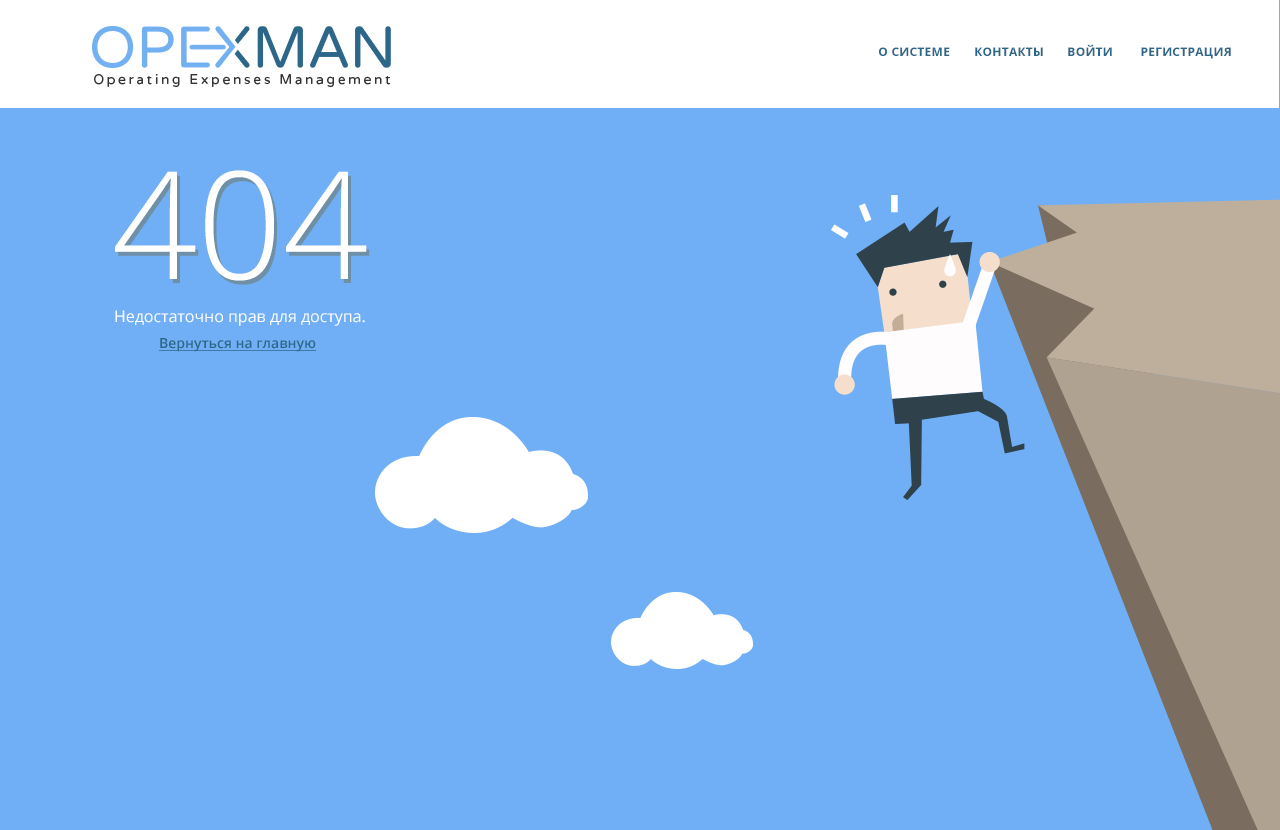
<style>
.page{position:relative;width:1280px;height:830px;background:#70aff5}
.page>*{position:absolute;margin:0}
.t1{font:12px "OpenSans-Bold";letter-spacing:0.025em;color:#2c6789;text-transform:uppercase}
.t2{font:149.4px "OpenSans-Light";color:#ffffff}
.t3{font:15.9px "OpenSans";color:#ffffff}
.t4{font:13.9px "OpenSans-Semibold";color:#2c6789;text-decoration:underline}
</style>
<div class="page">
<p class="t1" style="left:879px;top:47px;width:71px;height:9px">О системе</p>
<p class="t1" style="left:975px;top:47px;width:68px;height:9px">Контакты</p>
<p class="t1" style="left:1068px;top:44px;width:44px;height:12px">Войти</p>
<p class="t1" style="left:1141px;top:47px;width:90px;height:12px">РЕГИСТРация</p>
<p class="t2" style="left:115px;top:170px;width:252px;height:111px">404</p>
<p class="t3" style="left:115px;top:310px;width:250px;height:16px">Недостаточно прав для доступа.</p>
<p class="t4" style="left:159px;top:338px;width:158px;height:14px">Вернуться на главную</p>
</div>
